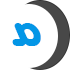
<style>
.page{position:relative;width:70px;height:70px;background:#ffffff}
.page>*{position:absolute;margin:0}
.t1{font:61.2px "HarlowSolid";color:#0396e6}
</style>
<div class="page">
<p class="t1" style="left:12px;top:23px;width:29px;height:23px;rotate:180deg">a</p>
</div>
